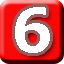
<style>
.page{position:relative;width:64px;height:64px;background:#ffffff}
.page>*{position:absolute;margin:0}
.t1{font:60px "Meiryo-Bold";color:#ffffff}
</style>
<div class="page">
<p class="t1" style="left:15px;top:7px;width:35px;height:46px">6</p>
</div>
